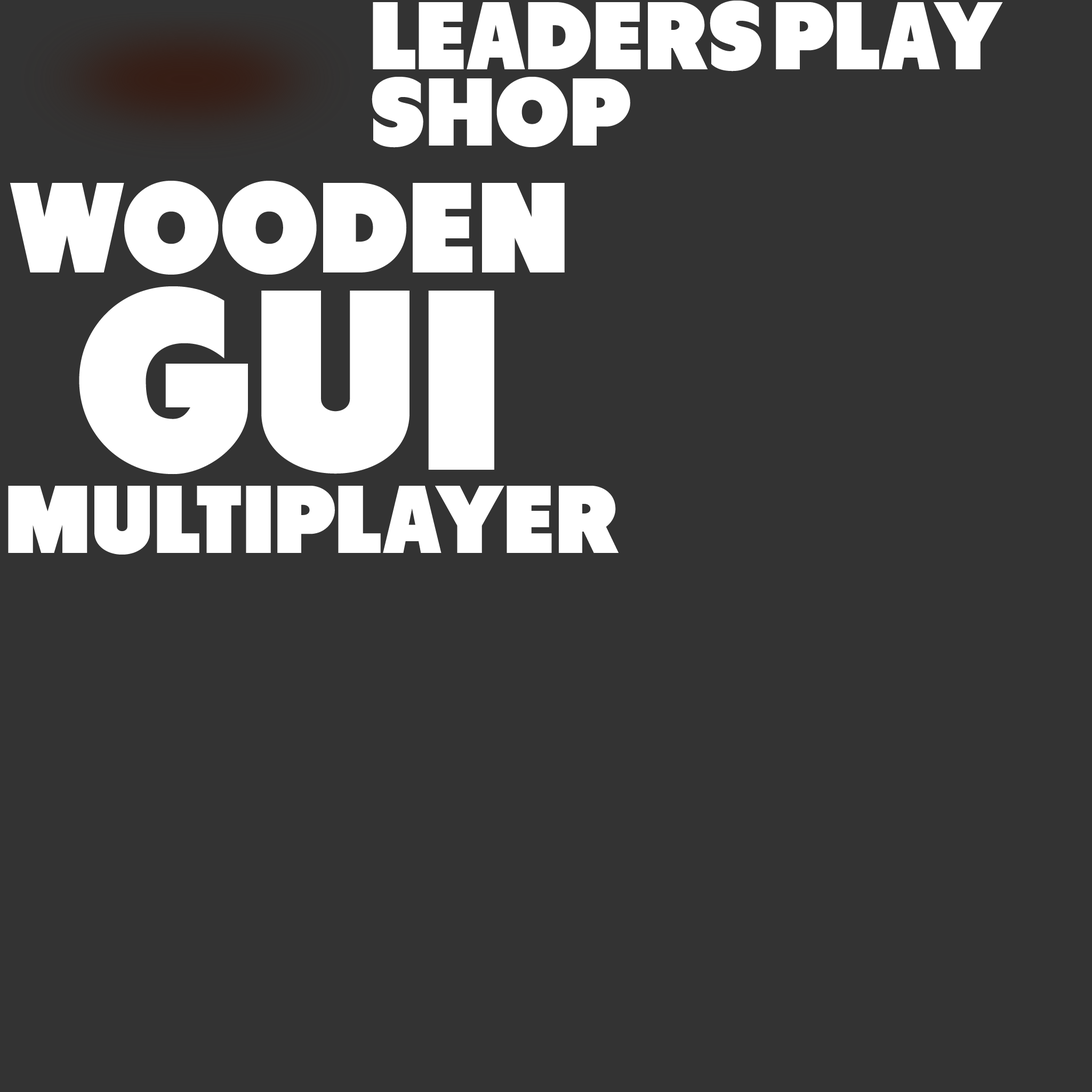
<style>
.page{position:relative;width:1092px;height:1092px;background:#333333}
.page>*{position:absolute;margin:0}
.t1{font:96px "Tondu-Beta";color:#ffffff;text-transform:uppercase}
.t2{font:128px/128px "Tondu-Beta";color:#ffffff;text-transform:uppercase}
.t3{font:255.9px/197.3px "Tondu-Beta";color:#ffffff;text-transform:uppercase}
</style>
<div class="page">
<p class="t1" style="left:373px;top:1px;width:388px;height:70px">leaders</p>
<p class="t1" style="left:776px;top:2px;width:227px;height:67px">play</p>
<p class="t1" style="left:372px;top:77px;width:258px;height:71px">shop</p>
<p class="t2" style="left:10px;top:181px;width:555px;height:294px;text-align:center">Wooden<br><span class="t3">GUI</span></p>
<p class="t1" style="left:8px;top:486px;width:611px;height:69px">multiplayer</p>
</div>
